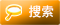
<style>
.page{position:relative;width:60px;height:25px}
.page>*{position:absolute;margin:0}
.t1{font:12.9px "SimHei";color:#ffffff}
</style>
<div class="page">
<p class="t1" style="left:29px;top:5px;width:25px;height:13px">搜索</p>
</div>
